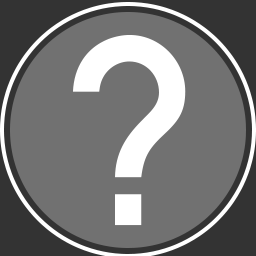
<style>
.page{position:relative;width:256px;height:256px;background:#717171}
.page>*{position:absolute;margin:0}
.t1{font:251.7px "ITCAvantGardePro-Md";letter-spacing:0.02em;color:#ffffff;text-transform:uppercase}
</style>
<div class="page">
<p class="t1" style="left:72px;top:35px;width:114px;height:191px">?</p>
</div>
